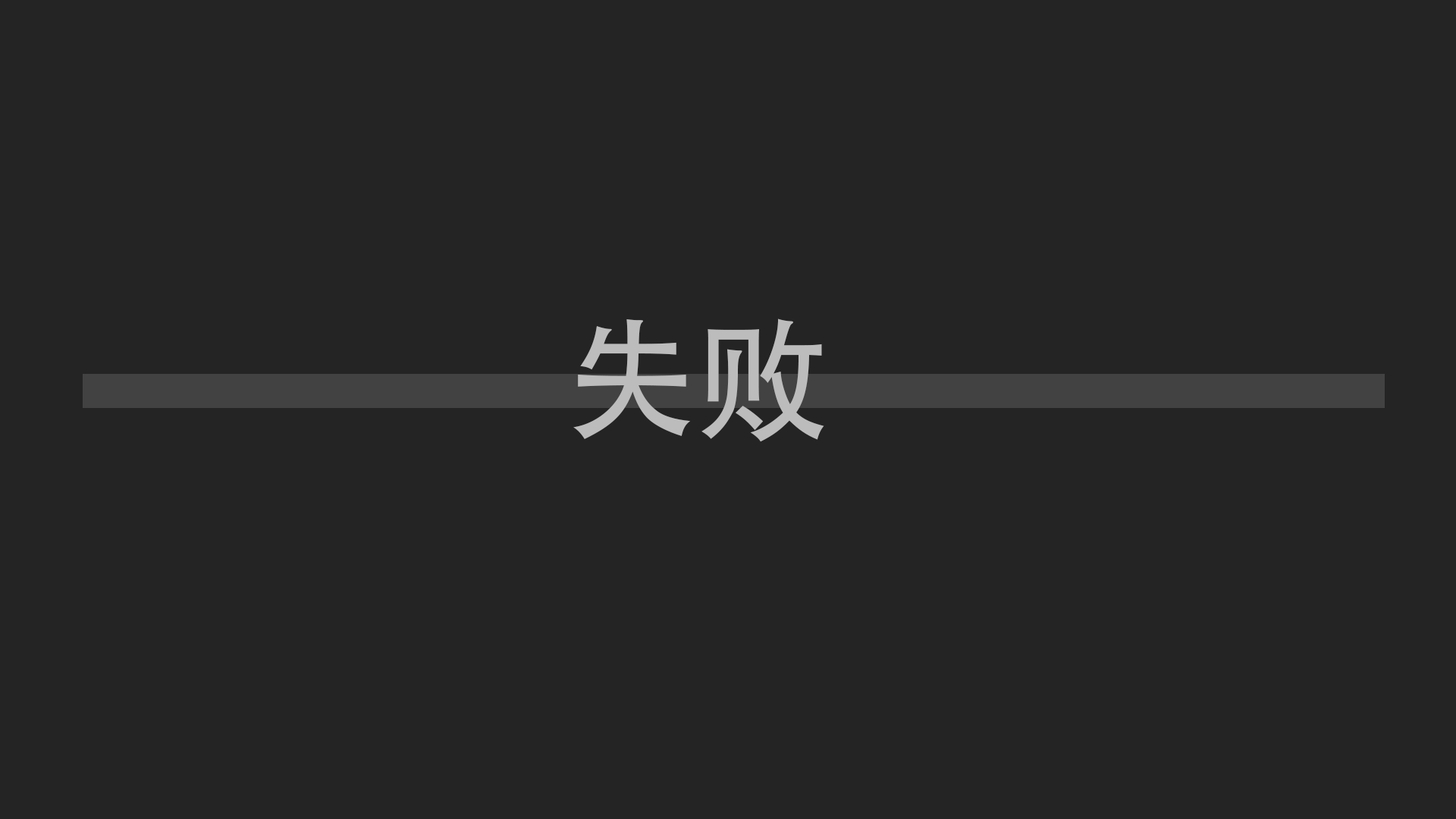
<style>
.page{position:relative;width:1456px;height:819px;background:#242424}
.page>*{position:absolute;margin:0}
.t1{font:131.7px "AdobeHeitiStd-Regular";color:#bcbcbc}
</style>
<div class="page">
<p class="t1" style="left:573px;top:318px;width:251px;height:124px">失败</p>
</div>
